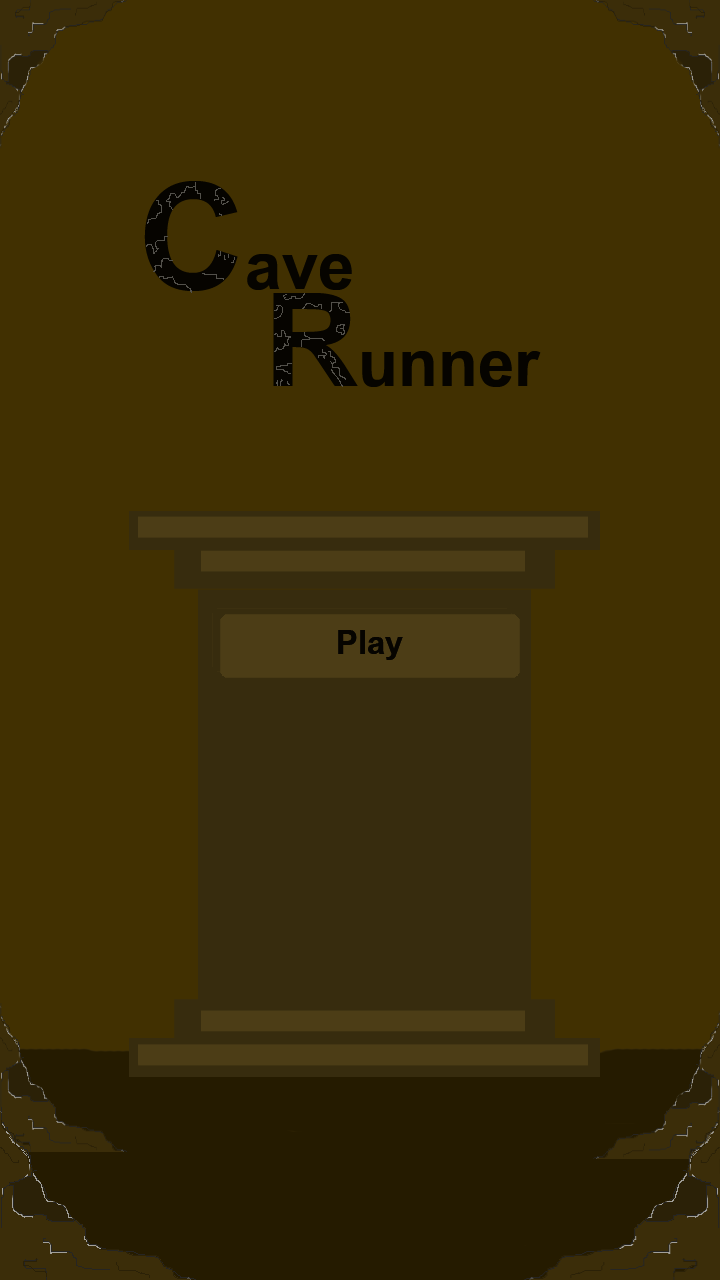
<style>
.page{position:relative;width:720px;height:1280px;background:#413001}
.page>*{position:absolute;margin:0}
.t1{font:100px "BrowalliaUPC-Bold";color:#060400}
.t2{font:226.9px "BrowalliaUPC-Bold";color:#060400}
.t3{font:200px "BrowalliaUPC-Bold";color:#060400}
.t4{font:50px "BrowalliaUPC-Bold";color:#060400}
</style>
<div class="page">
<p class="t1" style="left:144px;top:181px;width:208px;height:110px"><span class="t2">C</span>ave</p>
<p class="t1" style="left:273px;top:293px;width:268px;height:94px"><span class="t3">R</span>unner</p>
<p class="t4" style="left:338px;top:630px;width:65px;height:30px">Play</p>
<p class="t4" style="left:338px;top:630px;width:65px;height:30px">Play</p>
</div>
